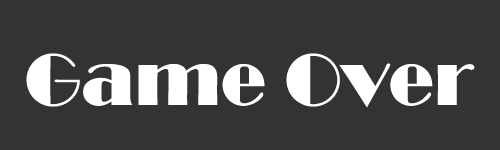
<style>
.page{position:relative;width:500px;height:150px;background:#333333}
.page>*{position:absolute;margin:0}
.t1{font:75px "Broadway";color:#ffffff}
</style>
<div class="page">
<p class="t1" style="left:26px;top:53px;width:449px;height:55px">Game Over</p>
</div>
